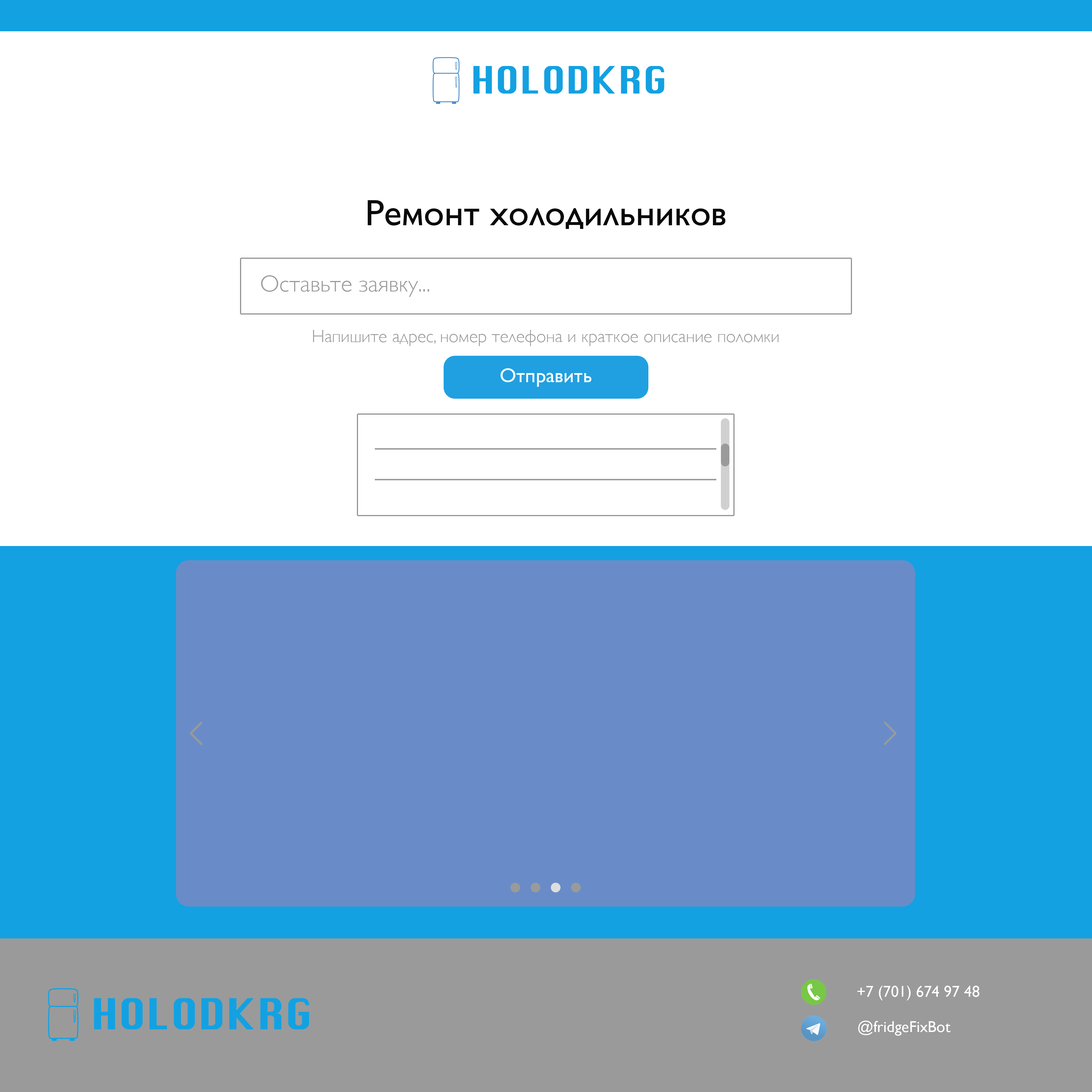
<style>
.page{position:relative;width:1092px;height:1092px;background:#ffffff}
.page>*{position:absolute;margin:0}
.t1{font:36.9px "GillSans";color:#090909}
.t2{font:23.5px "GillSans-Light";color:#9a9a9a}
.t3{font:17.8px "GillSans-Light";color:#9a9a9a}
.t4{font:20.2px "GillSans";color:#ffffff}
.t5{font:15.7px "GillSans";color:#ffffff}
</style>
<div class="page">
<p class="t1" style="left:368px;top:200px;width:357px;height:29px">Ремонт холодильников</p>
<p class="t2" style="left:261px;top:275px;width:168px;height:22px">Оставьте заявку...</p>
<p class="t3" style="left:313px;top:330px;width:466px;height:16px">Напишите адрес, номер телефона и краткое описание поломки</p>
<p class="t4" style="left:500px;top:368px;width:91px;height:19px">Отправить</p>
<p class="t5" style="left:857px;top:986px;width:122px;height:14px">+7 (701) 674 97 48</p>
<p class="t5" style="left:858px;top:1021px;width:93px;height:15px">@fridgeFixBot</p>
</div>
